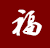
<style>
.page{position:relative;width:50px;height:48px;background:#7d0000}
.page>*{position:absolute;margin:0}
.t1{font:32.4px "Ò¶¸ùÓÑÃ«±ÊÐÐÊé¼òÌå";letter-spacing:0.2em;color:#ffffff}
</style>
<div class="page">
<p class="t1" style="left:12px;top:9px;width:30px;height:27px">福</p>
</div>
